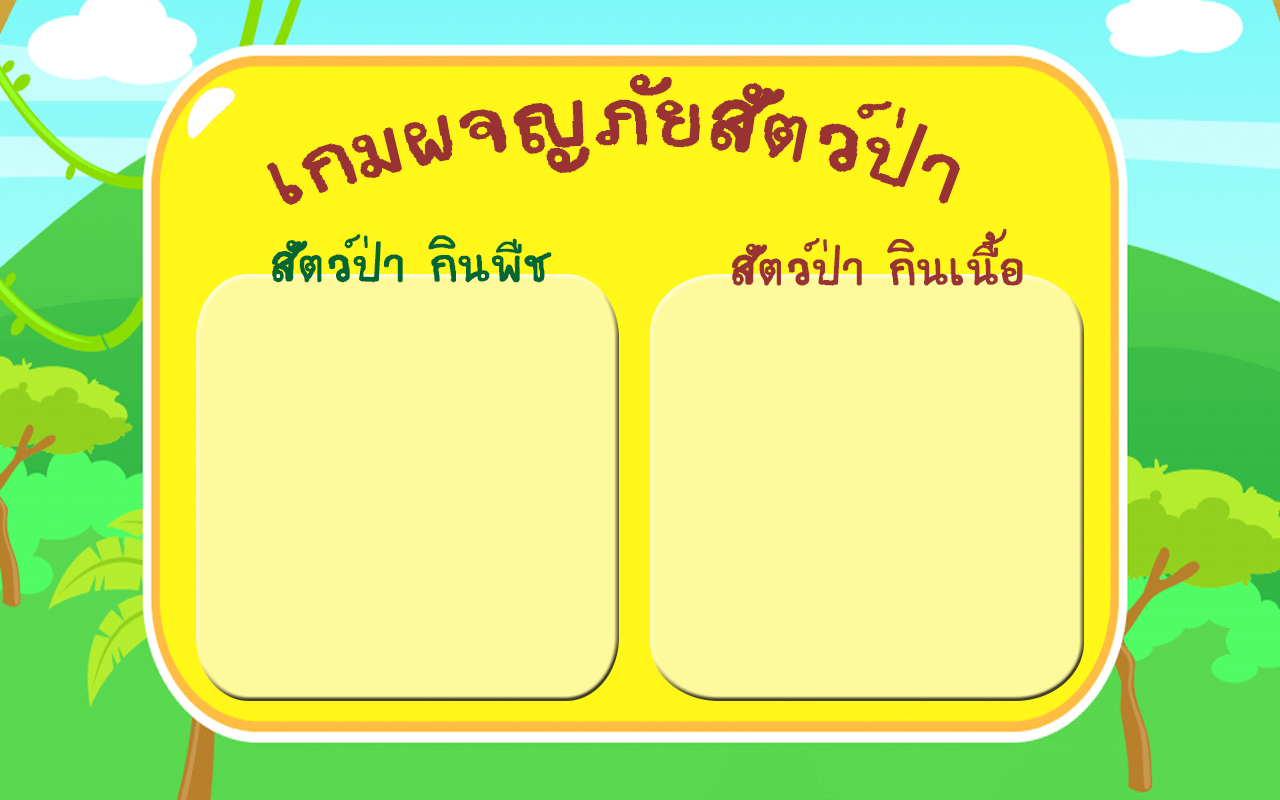
<style>
.page{position:relative;width:1280px;height:800px;background:#fff99d}
.page>*{position:absolute;margin:0}
.t1{font:120px "teddy";color:#993333}
.t2{font:71px "teddy";color:#993333}
.t3{font:71.4px "teddy";color:#006633}
</style>
<div class="page">
<p class="t1" style="left:266px;top:74px;width:695px;height:131px">เกมผจญภัยสัตว์ป่า</p>
<p class="t2" style="left:732px;top:229px;width:291px;height:57px">สัตว์ป่า กินเนื้อ</p>
<p class="t3" style="left:272px;top:234px;width:280px;height:49px">สัตว์ป่า กินพืช</p>
</div>
